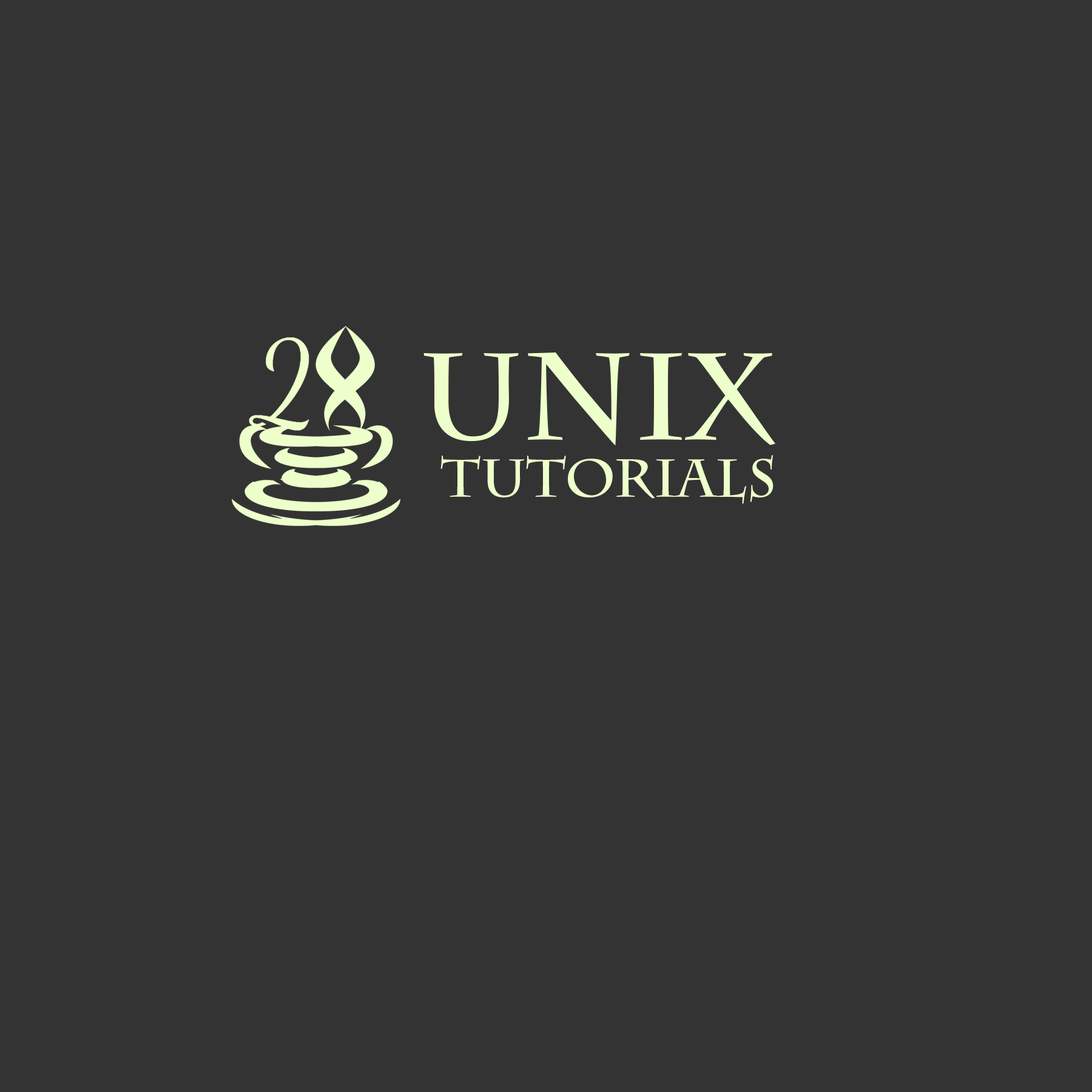
<style>
.page{position:relative;width:1092px;height:1092px;background:#333333}
.page>*{position:absolute;margin:0}
.t1{font:121.9px "CharlemagneStd-Bold";color:#edffca}
.t2{font:53.3px "CharlemagneStd-Bold";color:#edffca}
</style>
<div class="page">
<p class="t1" style="left:423px;top:352px;width:352px;height:94px">UNIX</p>
<p class="t2" style="left:440px;top:455px;width:333px;height:49px">Tutorials</p>
</div>
